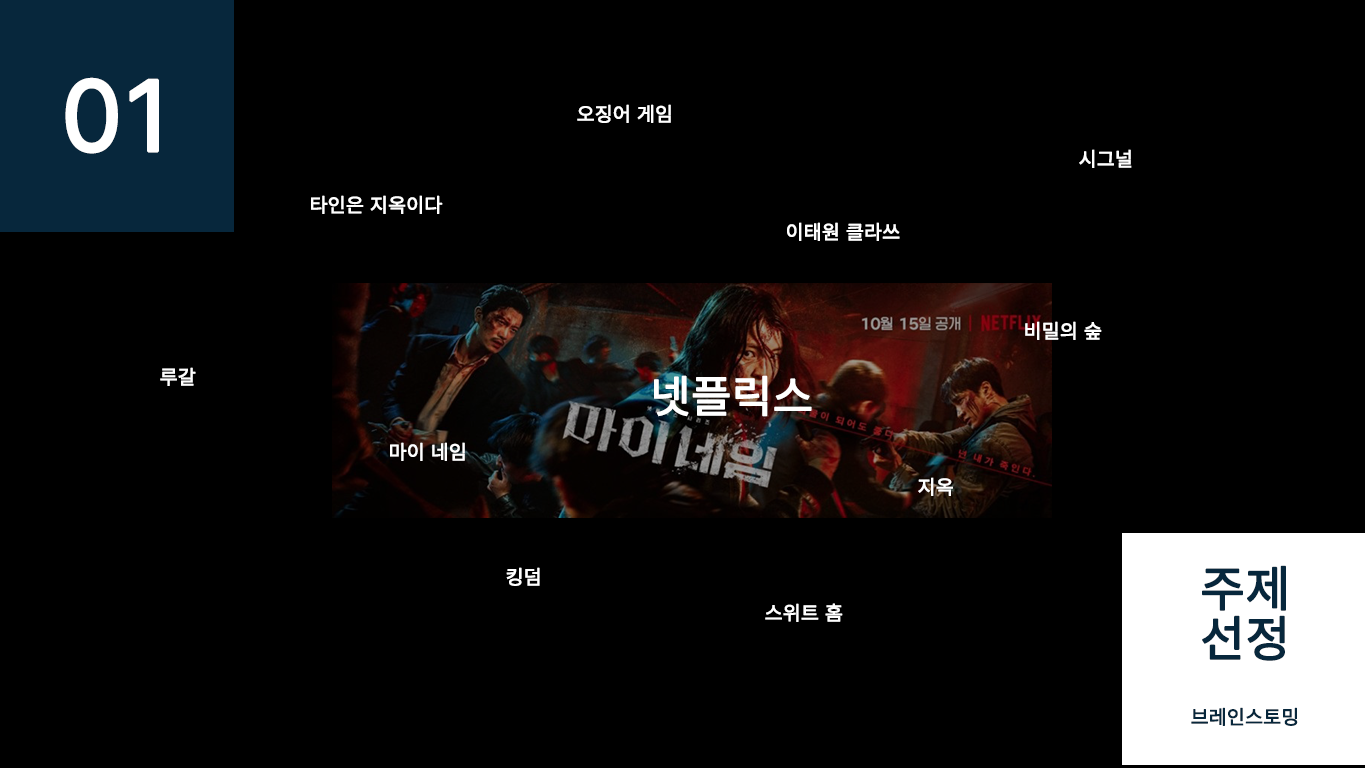
<style>
.page{position:relative;width:1365px;height:768px;background:#000000}
.page>*{position:absolute;margin:0}
.t1{font:100px "Pretendard-Regular";letter-spacing:0.03em;color:#ffffff;font-weight:bold}
.t2{font:20px "Pretendard-Regular";letter-spacing:0.03em;color:#ffffff;font-weight:bold}
.t3{font:45px "Pretendard-Regular";letter-spacing:0.03em;color:#ffffff;font-weight:bold}
.t4{font:50px/50px "Pretendard-Regular";letter-spacing:0.03em;color:#07273c;font-weight:bold}
.t5{font:20px "Pretendard-Regular";letter-spacing:0.03em;color:#07273c;font-weight:bold}
</style>
<div class="page">
<p class="t1" style="left:65px;top:77px;width:94px;height:77px">01</p>
<p class="t2" style="left:577px;top:104px;width:94px;height:19px">오징어 게임</p>
<p class="t2" style="left:1079px;top:149px;width:53px;height:19px">시그널</p>
<p class="t2" style="left:311px;top:195px;width:132px;height:19px">타인은 지옥이다</p>
<p class="t2" style="left:787px;top:222px;width:113px;height:19px">이태원 클라쓰</p>
<p class="t2" style="left:1025px;top:321px;width:77px;height:19px">비밀의 숲</p>
<p class="t2" style="left:160px;top:367px;width:36px;height:19px">루갈</p>
<p class="t3" style="left:654px;top:375px;width:158px;height:42px">넷플릭스</p>
<p class="t2" style="left:390px;top:442px;width:75px;height:19px">마이 네임</p>
<p class="t2" style="left:918px;top:477px;width:35px;height:19px">지옥</p>
<p class="t2" style="left:506px;top:567px;width:34px;height:19px">킹덤</p>
<p class="t4" style="left:1202px;top:565px;width:84px;height:96px">주제<br>선정</p>
<p class="t2" style="left:765px;top:603px;width:78px;height:19px">스위트 홈</p>
<p class="t5" style="left:1191px;top:707px;width:107px;height:19px">브레인스토밍</p>
</div>
